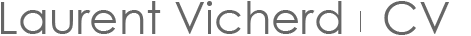
<style>
.page{position:relative;width:471px;height:36px;background:#ffffff}
.page>*{position:absolute;margin:0}
.t1{font:45px "CenturyGothic";color:#666666}
</style>
<div class="page">
<p class="t1" style="left:1px;top:1px;width:448px;height:34px">Laurent Vicherd   CV</p>
</div>
